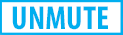
<style>
.page{position:relative;width:123px;height:35px;background:#ffffff}
.page>*{position:absolute;margin:0}
.t1{font:33.3px "MyriadPro-BoldCond";color:#00aeef}
</style>
<div class="page">
<p class="t1" style="left:12px;top:6px;width:96px;height:24px">UNMUTE</p>
</div>
